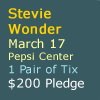
<style>
.page{position:relative;width:100px;height:100px;background:#395a61}
.page>*{position:absolute;margin:0}
.t1{font:13px "Verdana";letter-spacing:0.018em;color:#fed200;font-weight:bold}
.t2{font:12px "Verdana";letter-spacing:0.018em;color:#ffff99}
.t3{font:10px "Verdana";letter-spacing:0.018em;color:#ffff99}
.t4{font:11px "Verdana";letter-spacing:0.018em;color:#a3e2ee}
.t5{font:12px "Verdana";letter-spacing:0.018em;color:#fdfdfc}
</style>
<div class="page">
<p class="t1" style="left:8px;top:8px;width:76px;height:82px">Stevie<br>Wonder<br><span class="t2">March 17<br></span><span class="t3">Pepsi Center<br></span><span class="t4">1 Pair of Tix<br></span><span class="t5">$200 Pledge</span></p>
</div>
